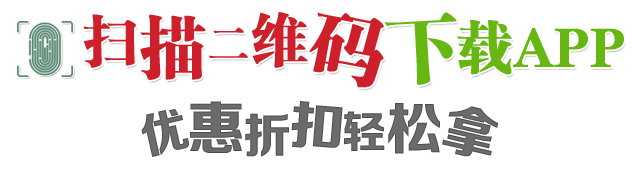
<style>
.page{position:relative;width:640px;height:170px;background:#ffffff}
.page>*{position:absolute;margin:0}
.t1{font:55px "FZCSJW--GB1-0";color:#cd202a}
.t2{font:66.7px "FZCSJW--GB1-0";color:#cd202a}
.t3{font:57.5px "FZCSJW--GB1-0";color:#cd202a}
.t4{font:75.7px "FZCSJW--GB1-0";color:#cd202a}
.t5{font:74.2px "FZCSJW--GB1-0";color:#66b711}
.t6{font:40px "FZCSJW--GB1-0";color:#cd202a}
.t7{font:55.8px "FZCSJW--GB1-0";color:#66b711}
.t8{font:57.7px "FZZDHJW--GB1-0";color:#6c6b6b}
.t9{font:52.2px "FZZDHJW--GB1-0";color:#6c6b6b;scale:1.08 1}
.t10{font:47.7px "FZZDHJW--GB1-0";color:#6c6b6b}
.t11{font:44.3px "FZZDHJW--GB1-0";color:#6c6b6b}
.t12{font:56.1px "FZZDHJW--GB1-0";color:#6c6b6b}
.t13{font:55.5px "FZZDHJW--GB1-0";color:#6c6b6b}
</style>
<div class="page">
<p class="t1" style="left:83px;top:14px;width:53px;height:54px">扫</p>
<p class="t2" style="left:140px;top:14px;width:66px;height:66px">描</p>
<p class="t3" style="left:252px;top:12px;width:56px;height:56px">维</p>
<p class="t4" style="left:309px;top:12px;width:75px;height:76px;rotate:11deg">码</p>
<p class="t5" style="left:384px;top:12px;width:73px;height:73px;rotate:-3deg">下</p>
<p class="t6" style="left:208px;top:27px;width:40px;height:31px">二</p>
<p class="t7" style="left:457px;top:20px;width:55px;height:55px">载</p>
<p class="t7" style="left:513px;top:28px;width:111px;height:39px">APP</p>
<p class="t8" style="left:190px;top:101px;width:53px;height:52px">惠</p>
<p class="t9" style="left:291px;top:101px;width:52px;height:47px;rotate:5deg">扣</p>
<p class="t10" style="left:141px;top:109px;width:48px;height:48px;rotate:-13deg">优</p>
<p class="t10" style="left:245px;top:113px;width:44px;height:44px">折</p>
<p class="t11" style="left:344px;top:111px;width:41px;height:40px">轻</p>
<p class="t12" style="left:388px;top:103px;width:52px;height:51px">松</p>
<p class="t13" style="left:442px;top:106px;width:57px;height:51px;rotate:13deg">拿</p>
</div>
